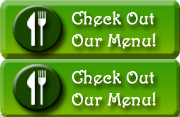
<style>
.page{position:relative;width:180px;height:117px}
.page>*{position:absolute;margin:0}
.t1{font:18px "Harrington";color:#ffffff;font-weight:bold}
</style>
<div class="page">
<p class="t1" style="left:71px;top:11px;width:85px;height:38px">Check Out<br>Our Menu!</p>
<p class="t1" style="left:71px;top:70px;width:85px;height:38px">Check Out<br>Our Menu!</p>
</div>
